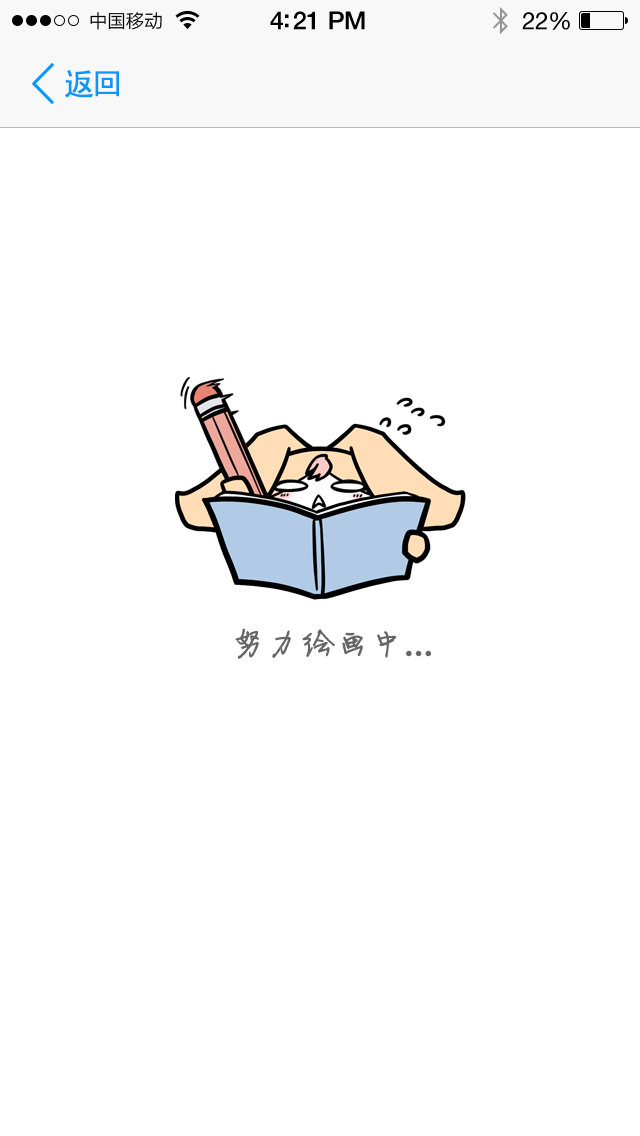
<style>
.page{position:relative;width:640px;height:1136px;background:#ffffff}
.page>*{position:absolute;margin:0}
.t1{font:30px "SimHei";letter-spacing:-0.075em;color:#0a97fb;font-weight:bold}
.t2{font:34px "FZJLJW--GB1-0";letter-spacing:-0.01em;color:#666666;font-weight:bold}
.t3{font:34px "Vani";letter-spacing:-0.01em;color:#666666;font-weight:bold}
</style>
<div class="page">
<p class="t1" style="left:65px;top:70px;width:54px;height:28px">返回</p>
<p class="t2" style="left:235px;top:628px;width:197px;height:31px">努力绘画中<span class="t3">...</span></p>
</div>
